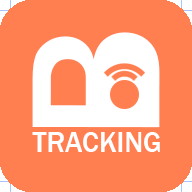
<style>
.page{position:relative;width:192px;height:192px;background:#ff7f50}
.page>*{position:absolute;margin:0}
.t1{font:190px "FranklinGothic-Medium";color:#ffffff}
.t2{font:29px "FranklinGothic-Medium";color:#ffffff}
</style>
<div class="page">
<p class="t1" style="left:32px;top:32px;width:128px;height:96px;rotate:-90deg">B</p>
<p class="t2" style="left:32px;top:132px;width:128px;height:20px">TRACKING</p>
</div>
